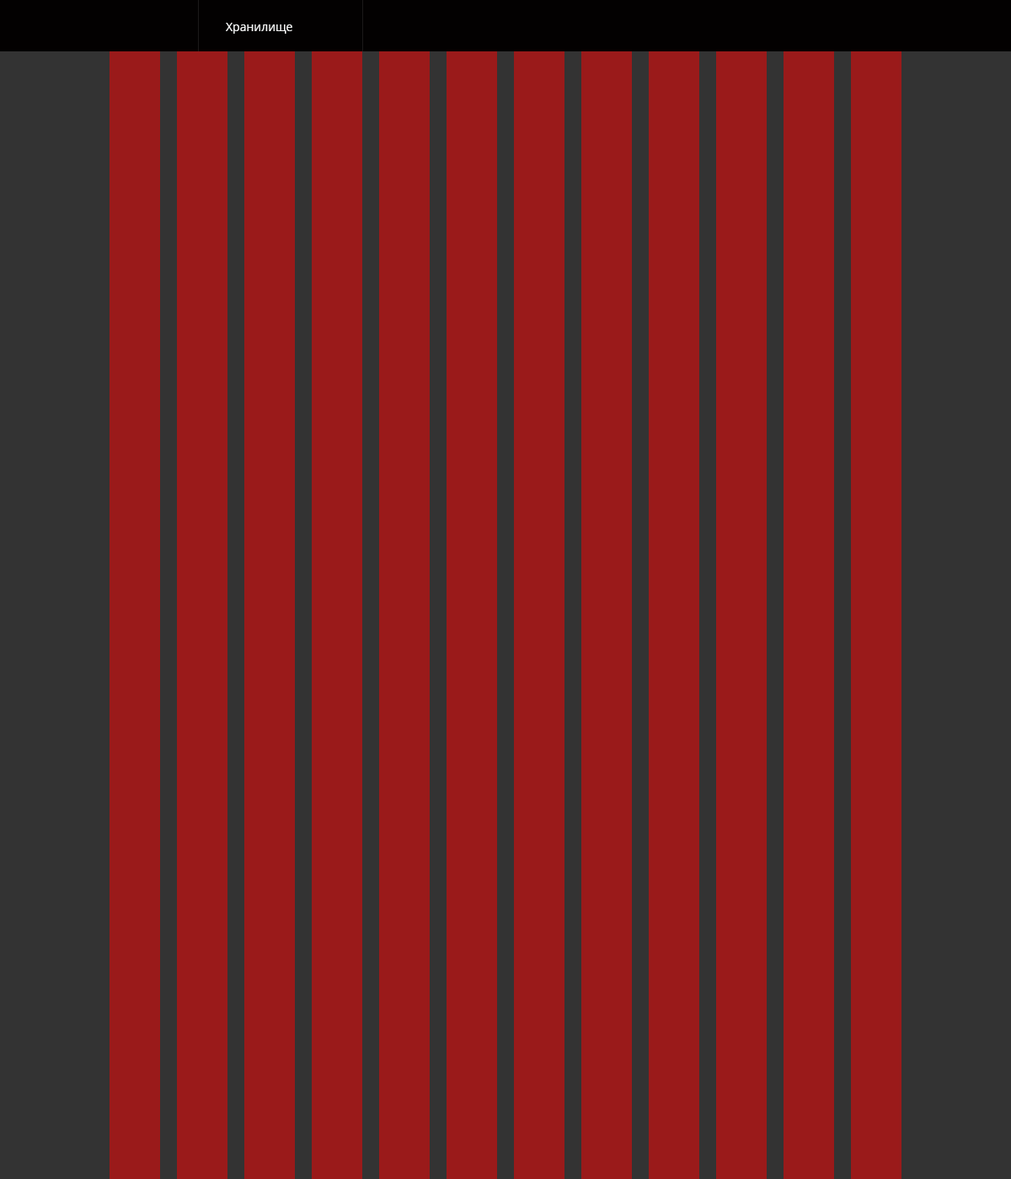
<style>
.page{position:relative;width:1011px;height:1179px;background:#9a1a1a}
.page>*{position:absolute;margin:0}
.t1{font:11.8px "OpenSans";color:#f4f4f4}
</style>
<div class="page">
<p class="t1" style="left:226px;top:23px;width:66px;height:11px">Хранилище</p>
</div>
